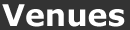
<style>
.page{position:relative;width:130px;height:30px;background:#333333}
.page>*{position:absolute;margin:0}
.t1{font:30px "Verdana-Bold";color:#ffffff}
</style>
<div class="page">
<p class="t1" style="left:2px;top:4px;width:123px;height:23px">Venues</p>
</div>
